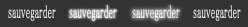
<style>
.page{position:relative;width:248px;height:27px;background:#333333}
.page>*{position:absolute;margin:0}
.t1{font:18.1px "MS-PMincho";color:#ffffff;font-weight:bold;scale:0.5 1}
</style>
<div class="page">
<p class="t1" style="left:8px;top:5px;width:48px;height:16px">sauvegarder</p>
<p class="t1" style="left:69px;top:5px;width:48px;height:16px">sauvegarder</p>
<p class="t1" style="left:132px;top:5px;width:48px;height:16px">sauvegarder</p>
<p class="t1" style="left:193px;top:5px;width:48px;height:16px">sauvegarder</p>
</div>
